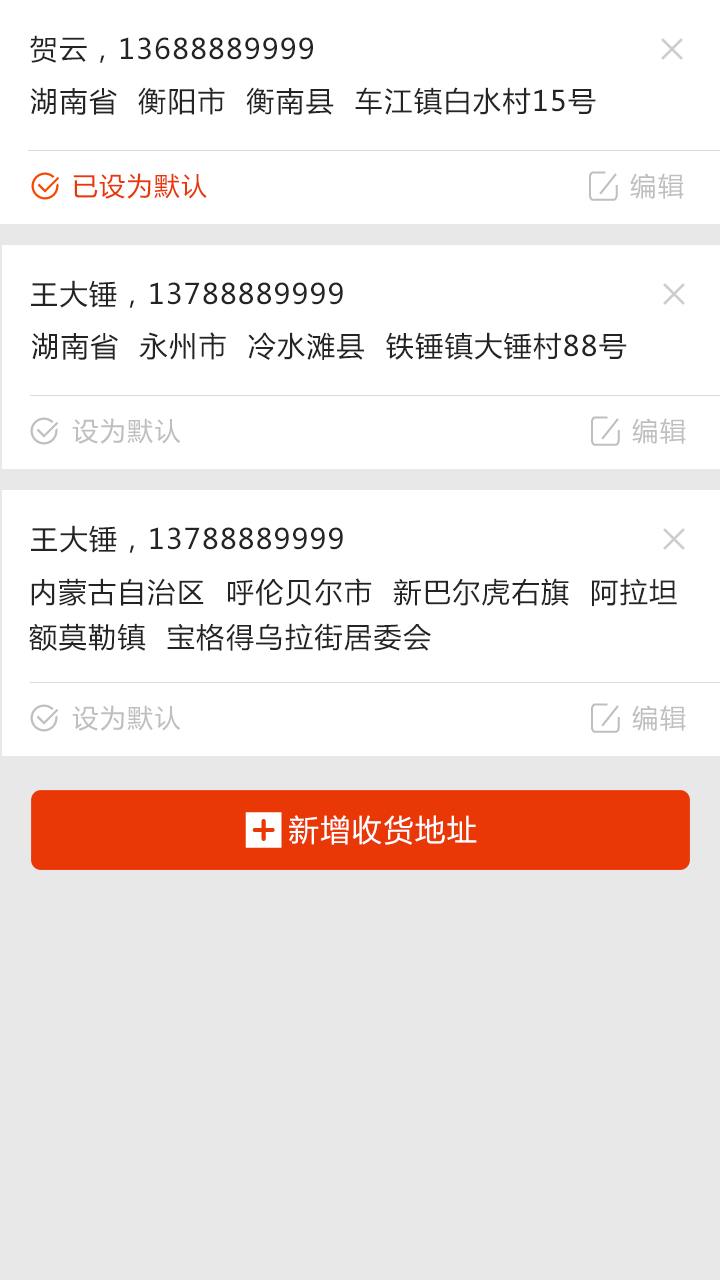
<style>
.page{position:relative;width:720px;height:1280px;background:#ffffff}
.page>*{position:absolute;margin:0}
.t1{font:28px "MicrosoftYaHei";letter-spacing:0.055em;color:#252424;text-transform:uppercase}
.t2{font:26px "MicrosoftYaHei";letter-spacing:0.055em;color:#ea3706;text-transform:uppercase}
.t3{font:26px "MicrosoftYaHei";letter-spacing:0.055em;color:#bfbfbf;text-transform:uppercase}
.t4{font:28px/45px "MicrosoftYaHei";letter-spacing:0.055em;color:#252424;text-transform:uppercase}
.t5{font:30px "MicrosoftYaHei";letter-spacing:0.055em;color:#ffffff;text-transform:uppercase}
</style>
<div class="page">
<p class="t1" style="left:30px;top:35px;width:283px;height:28px">贺云，13688889999</p>
<p class="t1" style="left:30px;top:87px;width:566px;height:28px">湖南省  衡阳市  衡南县  车江镇白水村15号</p>
<p class="t2" style="left:73px;top:173px;width:134px;height:26px">已设为默认</p>
<p class="t3" style="left:630px;top:173px;width:54px;height:26px">编辑</p>
<p class="t1" style="left:31px;top:280px;width:312px;height:28px">王大锤，13788889999</p>
<p class="t1" style="left:31px;top:332px;width:596px;height:28px">湖南省  永州市  冷水滩县  铁锤镇大锤村88号</p>
<p class="t3" style="left:72px;top:418px;width:109px;height:26px">设为默认</p>
<p class="t3" style="left:632px;top:418px;width:54px;height:26px">编辑</p>
<p class="t1" style="left:31px;top:525px;width:312px;height:28px">王大锤，13788889999</p>
<p class="t4" style="left:29px;top:578px;width:648px;height:73px">内蒙古自治区  呼伦贝尔市  新巴尔虎右旗  阿拉坦<br>额莫勒镇  宝格得乌拉街居委会</p>
<p class="t3" style="left:72px;top:705px;width:109px;height:26px">设为默认</p>
<p class="t3" style="left:632px;top:705px;width:54px;height:26px">编辑</p>
<p class="t5" style="left:289px;top:815px;width:188px;height:30px">新增收货地址</p>
</div>
